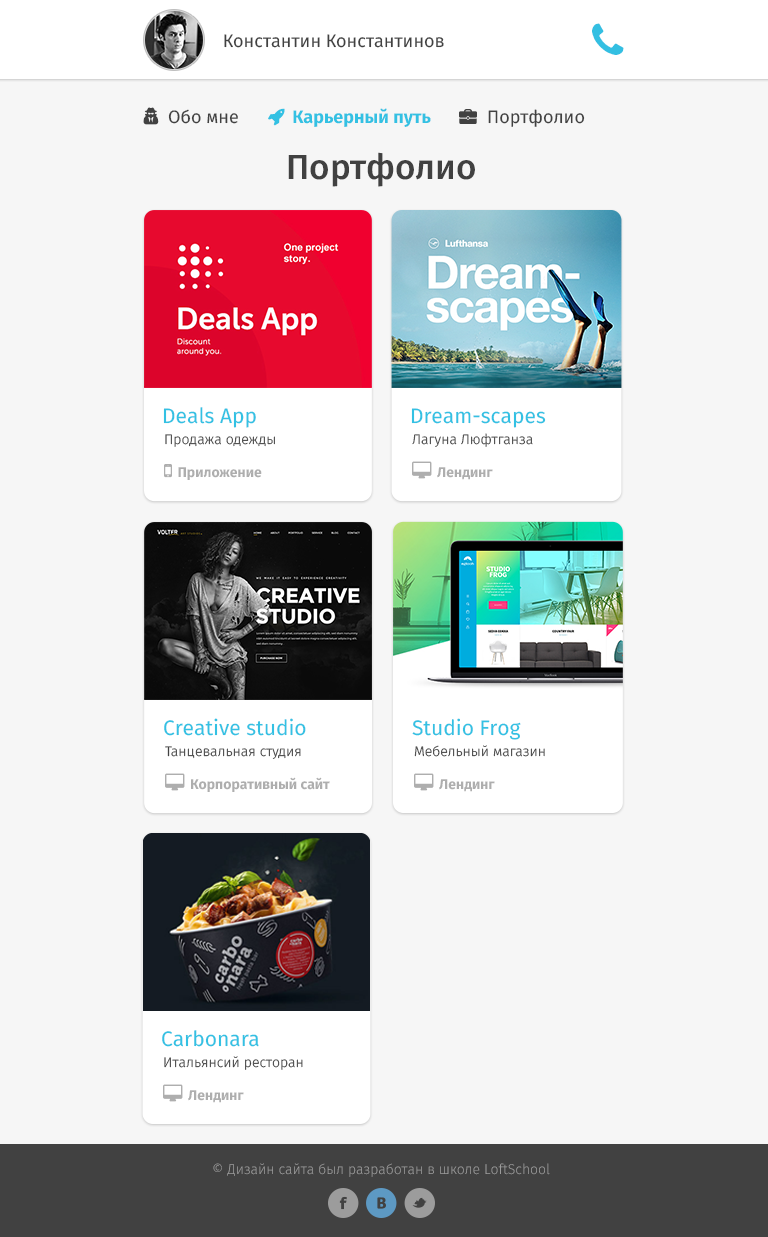
<style>
.page{position:relative;width:768px;height:1237px;background:#f6f6f6}
.page>*{position:absolute;margin:0}
.t1{font:18px "FiraSans-Regular";color:#414141}
.t2{font:34.8px "FiraSans-Medium";color:#414141}
.t3{font:21px "FiraSans-Regular";color:#33c1e3}
.t4{font:14px "FiraSans-Light";color:#414141}
.t5{font:14.2px "FiraSans-Light";color:#9c9c9c}
</style>
<div class="page">
<p class="t1" style="left:224px;top:34px;width:220px;height:14px">Константин Константинов</p>
<p class="t1" style="left:488px;top:109px;width:97px;height:18px">Портфолио</p>
<p class="t2" style="left:288px;top:152px;width:187px;height:35px">Портфолио</p>
<p class="t3" style="left:163px;top:407px;width:93px;height:21px">Deals App</p>
<p class="t3" style="left:411px;top:408px;width:135px;height:20px">Dream-scapes</p>
<p class="t4" style="left:165px;top:434px;width:110px;height:13px">Продажа одежды</p>
<p class="t4" style="left:412px;top:433px;width:121px;height:14px">Лагуна Люфтганза</p>
<p class="t3" style="left:164px;top:718px;width:142px;height:18px">Creative studio</p>
<p class="t3" style="left:412px;top:718px;width:109px;height:22px">Studio Frog</p>
<p class="t4" style="left:165px;top:746px;width:136px;height:13px">Танцевальная студия</p>
<p class="t4" style="left:414px;top:745px;width:131px;height:12px">Мебельный магазин</p>
<p class="t3" style="left:162px;top:1030px;width:97px;height:17px">Carbonara</p>
<p class="t4" style="left:164px;top:1056px;width:139px;height:14px">Итальянсий ресторан</p>
<p class="t5" style="left:213px;top:1163px;width:337px;height:14px">© Дизайн сайта был разработан в школе LoftSchool</p>
</div>
